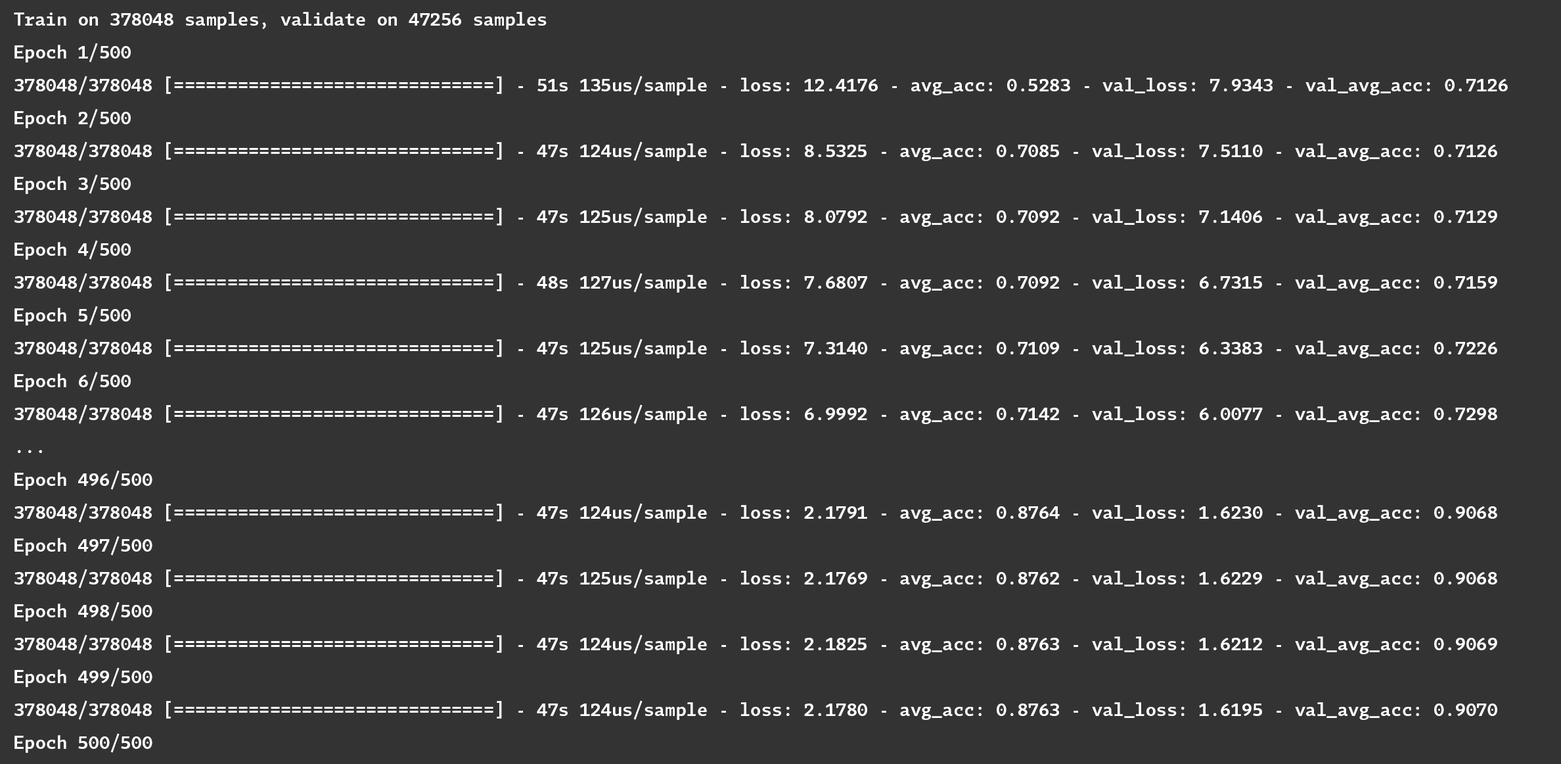
<style>
.page{position:relative;width:1561px;height:764px;background:#333333}
.page>*{position:absolute;margin:0}
.t1{font:17.8px/32.9px "TabacMonoSemiBold";color:#ffffff}
.t2{font:17.8px/32.9px "TabacMono";color:#ffffff}
</style>
<div class="page">
<p class="t1" style="left:14px;top:12px;width:1494px;height:740px">Train on 378048 samples, validate on 47256 samples<br>Epoch 1/500<br>378048/378048 [==============================] - 51s 135us/sample - loss: 12.4176 - avg_acc: 0.5283 - val_loss: 7.9343 - val_avg_acc: 0.7126<br>Epoch 2/500<br>378048/378048 [==============================] - 47s 124us/sample - loss: 8.5325 - avg_acc: 0.7085 - val_loss: 7.5110 - val_avg_acc: 0.7126<br>Epoch 3/500<br>378048/378048 [==============================] - 47s 125us/sample - loss: 8.0792 - avg_acc: 0.7092 - val_loss: 7.1406 - val_avg_acc: 0.7129<br>Epoch 4/500<br>378048/378048 [==============================] - 48s 127us/sample - loss: 7.6807 - avg_acc: 0.7092 - val_loss: 6.7315 - val_avg_acc: 0.7159<br>Epoch 5/500<br>378048/378048 [==============================] - 47s 125us/sample - loss: 7.3140 - avg_acc: 0.7109 - val_loss: 6.3383 - val_avg_acc: 0.7226<br>Epoch 6/500<br>378048/378048 [==============================] - 47s 126us/sample - loss: 6.9992 - avg_acc: 0.7142 - val_loss: 6.0077 - val_avg_acc: 0.7298<br>...<br>Epoch 496/500<br>378048/378048 [==============================] - 47s 124us/sample - loss: 2.1791 - avg_acc: 0.8764 - val_loss: 1.6230 - val_avg_acc: 0.9068<br>Epoch 497/500<br>378048/378048 [==============================] - 47s 125us/sample - loss: 2.1769 - avg_acc: 0.8762 - val_loss: 1.6229 - val_avg_acc: 0.9068<br>Epoch 498/500<br>378048/378048 [==============================] - 47s 124us/sample - loss: 2.1825 - avg_acc: 0.8763 - val_loss: 1.6212 - val_avg_acc: 0.9069<br>Epoch 499/500<br>378048/378048 [==============================] - 47s 124us/sample - loss: 2.1780 - avg_acc: 0.8763 - val_loss: 1.6195 - val_avg_acc: 0.9070<br>Epoch 500/500<br><span class="t2">378048/378048 [==============================] - 48s 128us/sample - loss: 2.1744 - avg_acc: 0.8765 - val_loss: 1.6204 - val_avg_acc: 0.9070</span></p>
</div>
